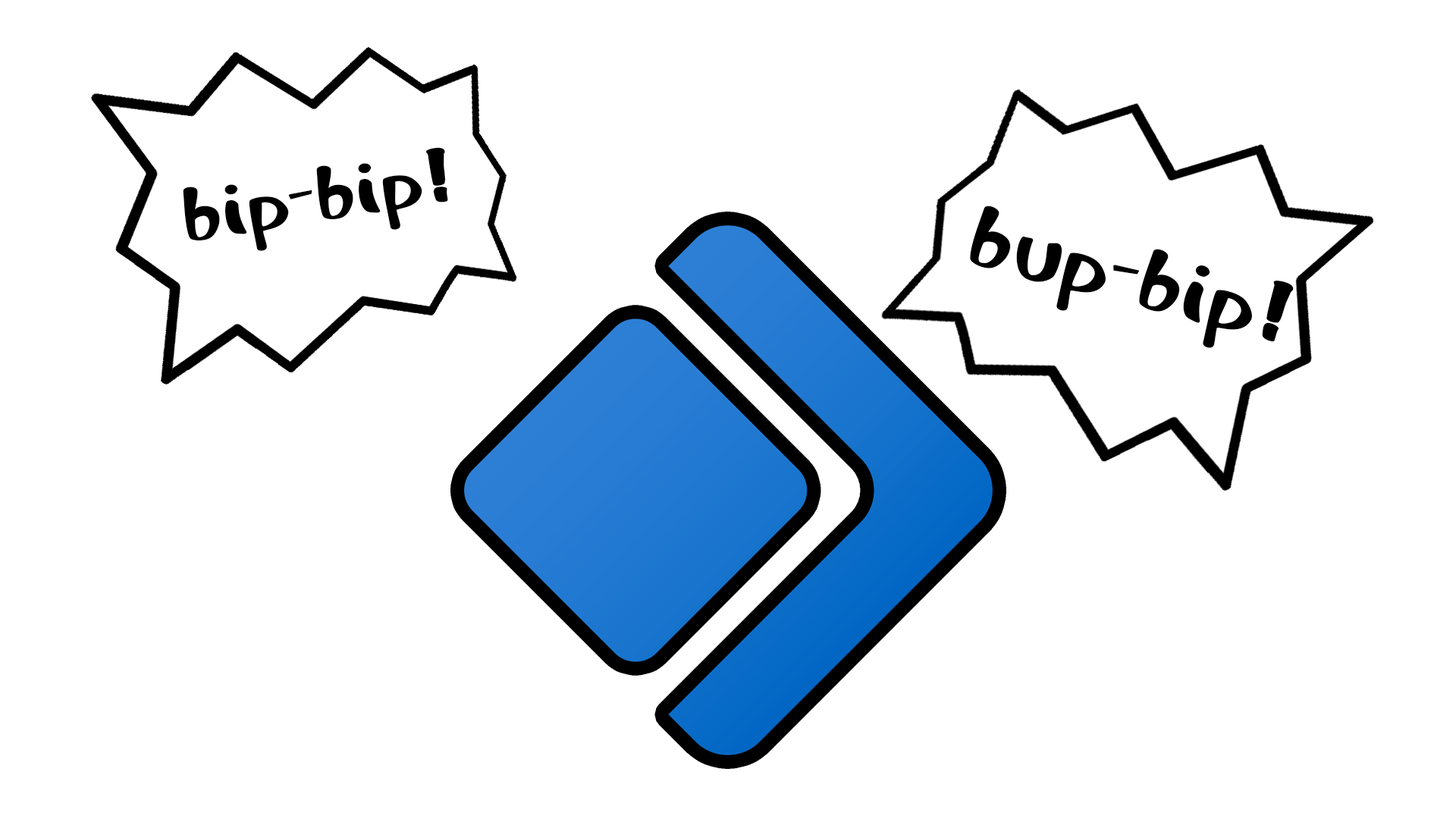
<style>
.page{position:relative;width:1456px;height:819px;background:#ffffff}
.page>*{position:absolute;margin:0}
.t1{font:89.5px "Cartoon";letter-spacing:-0.02em;color:#000000;font-weight:bold}
.t2{font:99.9px "Cartoon";letter-spacing:-0.02em;color:#000000;font-weight:bold}
</style>
<div class="page">
<p class="t1" style="left:183px;top:147px;width:265px;height:104px;rotate:-9deg">bip-bip!</p>
<p class="t2" style="left:970px;top:206px;width:324px;height:142px;rotate:14deg">bup-bip!</p>
</div>
